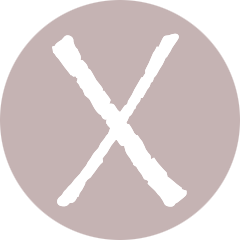
<style>
.page{position:relative;width:240px;height:240px;background:#c5b3b3}
.page>*{position:absolute;margin:0}
.t1{font:173px "Papyrus-Regular";letter-spacing:0.075em;color:#ffffff;text-transform:uppercase;font-weight:bold}
</style>
<div class="page">
<p class="t1" style="left:52px;top:33px;width:135px;height:174px">x</p>
</div>
